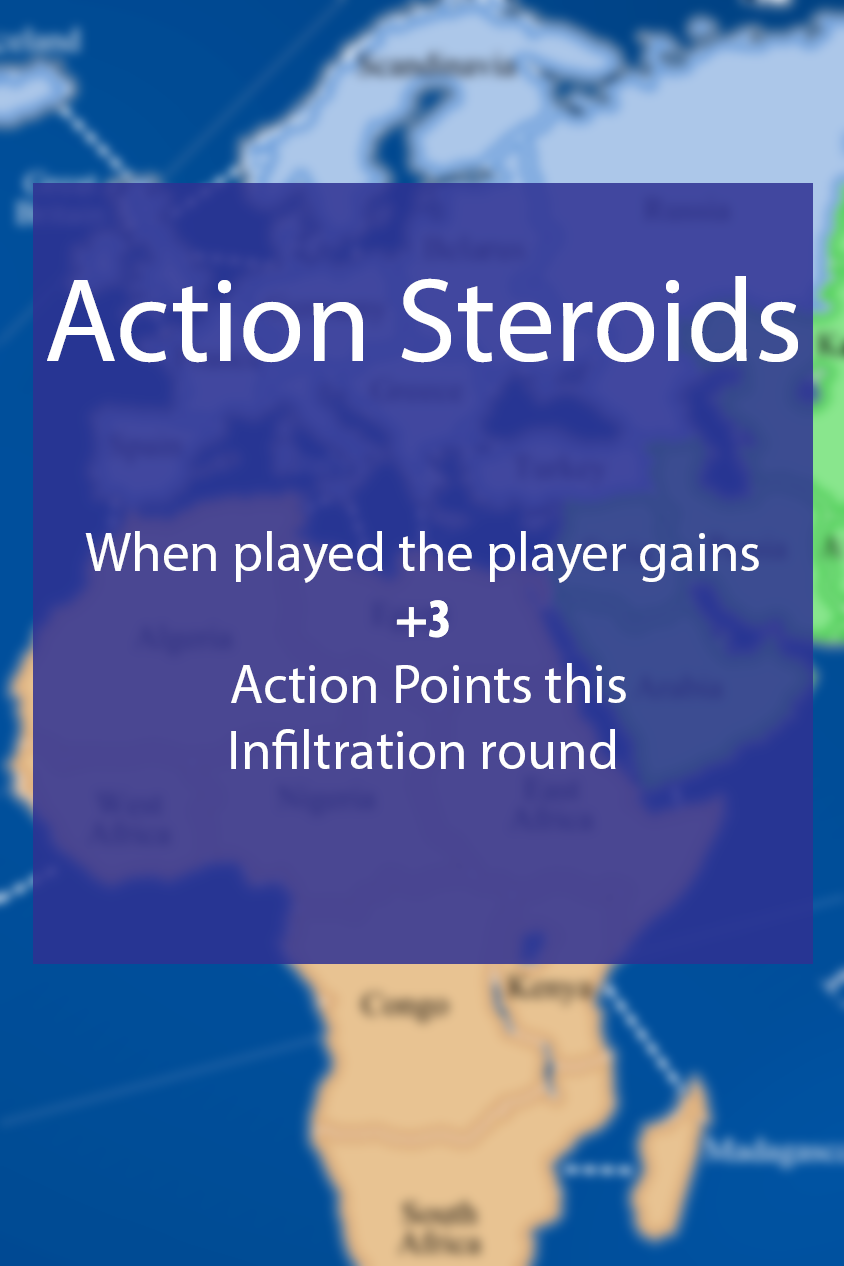
<style>
.page{position:relative;width:844px;height:1266px}
.page>*{position:absolute;margin:0}
.t1{font:55px "MyriadPro-Regular";color:#ffffff}
.t2{font:48px "MyriadPro-Regular";color:#ffffff}
.t3{font:120px "MyriadPro-Regular";color:#ffffff}
.t4{font:55px "MyriadPro-BoldCond";color:#ffffff}
</style>
<div class="page">
<p class="t1" style="left:47px;top:276px;width:751px;height:493px;text-align:center"><span class="t2"><br></span><span class="t3">Action Steroids<br><br><br><br><br><br></span>When played the player gains <br><span class="t4">+3<br></span> Action Points this <br>Infiltration round</p>
</div>
